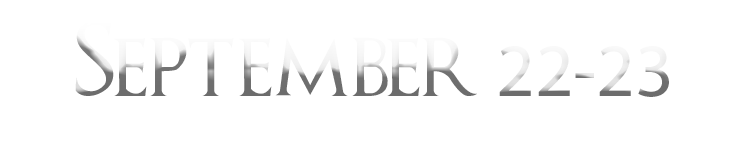
<style>
.page{position:relative;width:747px;height:154px;background:#ffffff}
.page>*{position:absolute;margin:0}
.t1{font:58.3px "GameofThrones"}
.t2{font:75px "GameofThrones"}
.t3{font:75px "MyriadPro-Regular"}
</style>
<div class="page">
<p class="t1" style="left:75px;top:21px;width:594px;height:76px"><span class="t2">S</span>eptember <span class="t3">22-23</span></p>
</div>
